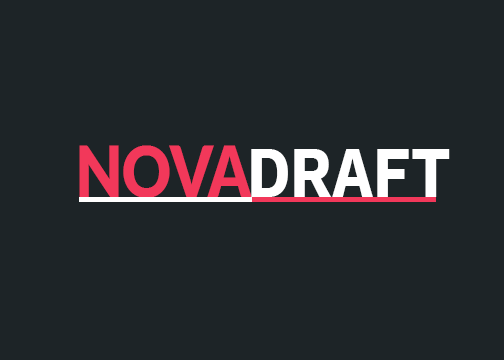
<style>
.page{position:relative;width:504px;height:360px;background:#1d2427}
.page>*{position:absolute;margin:0}
.t1{font:73.2px "Lato-Black";color:#fc4349;scale:0.83 1}
.t2{font:73.2px "WorkSans-Bold";color:#ffffff;scale:0.83 1}
</style>
<div class="page">
<p class="t1" style="left:79px;top:145px;width:173px;height:53px">NOVA</p>
<p class="t2" style="left:251px;top:149px;width:199px;height:48px">DRAFT</p>
</div>
